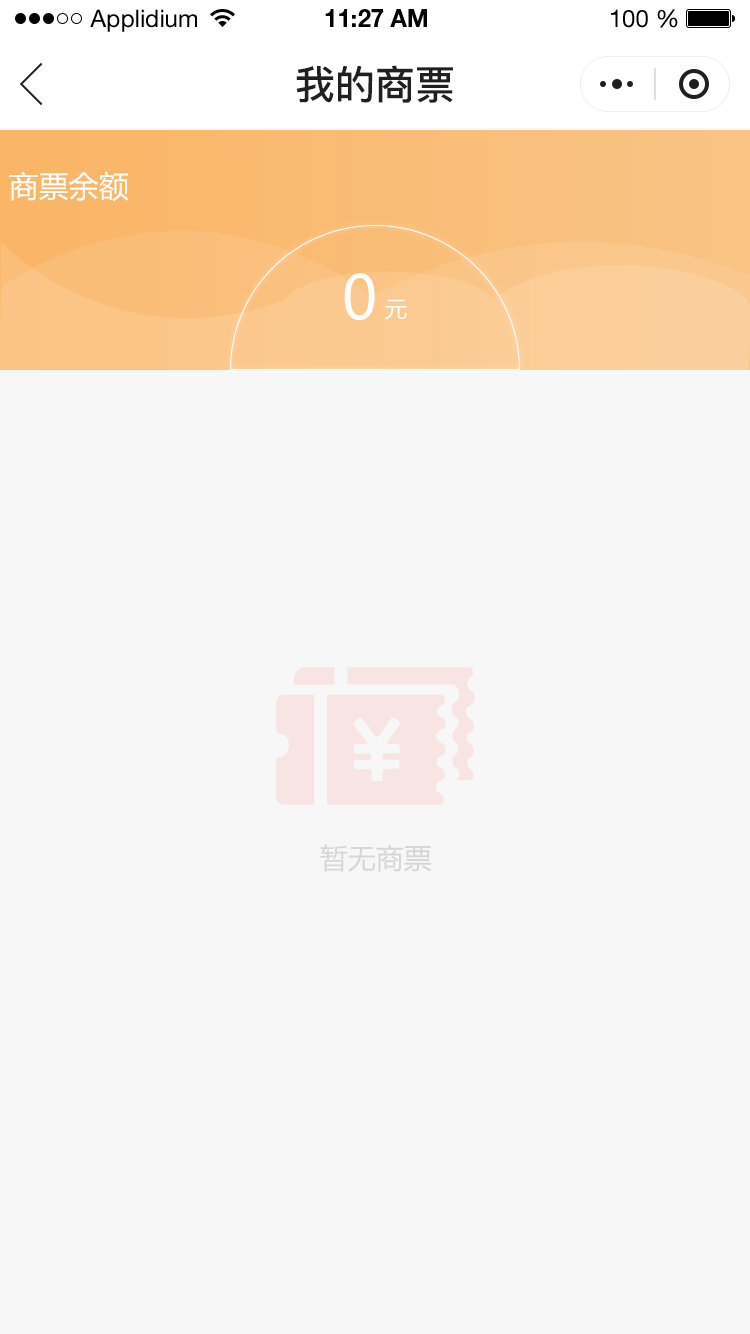
<style>
.page{position:relative;width:750px;height:1334px;background:#f7f7f7}
.page>*{position:absolute;margin:0}
.t1{font:24px "HelveticaNeueLTStd-Roman";color:#000000}
.t2{font:24px "HelveticaNeueLTStd-Bd";color:#000000}
.t3{font:40px "PingFang-SC-Bold";color:#202020;text-transform:uppercase}
.t4{font:30px "MicrosoftYaHei";color:#ffffff;text-transform:uppercase}
.t5{font:60px "MicrosoftYaHei";color:#ffffff;text-transform:uppercase}
.t6{font:22px "MicrosoftYaHei";color:#ffffff;text-transform:uppercase}
.t7{font:28px "MicrosoftYaHei";color:#d6d6d6;text-transform:uppercase}
</style>
<div class="page">
<p class="t1" style="left:90px;top:9px;width:107px;height:23px">Applidium</p>
<p class="t2" style="left:325px;top:9px;width:102px;height:18px">11:27 AM</p>
<p class="t1" style="left:611px;top:9px;width:67px;height:19px">100 %</p>
<p class="t3" style="left:296px;top:65px;width:157px;height:38px">我的商票</p>
<p class="t4" style="left:9px;top:171px;width:120px;height:30px">商票余额</p>
<p class="t5" style="left:344px;top:273px;width:31px;height:47px">0</p>
<p class="t6" style="left:385px;top:299px;width:22px;height:21px">元</p>
<p class="t7" style="left:320px;top:844px;width:112px;height:28px">暂无商票</p>
</div>
